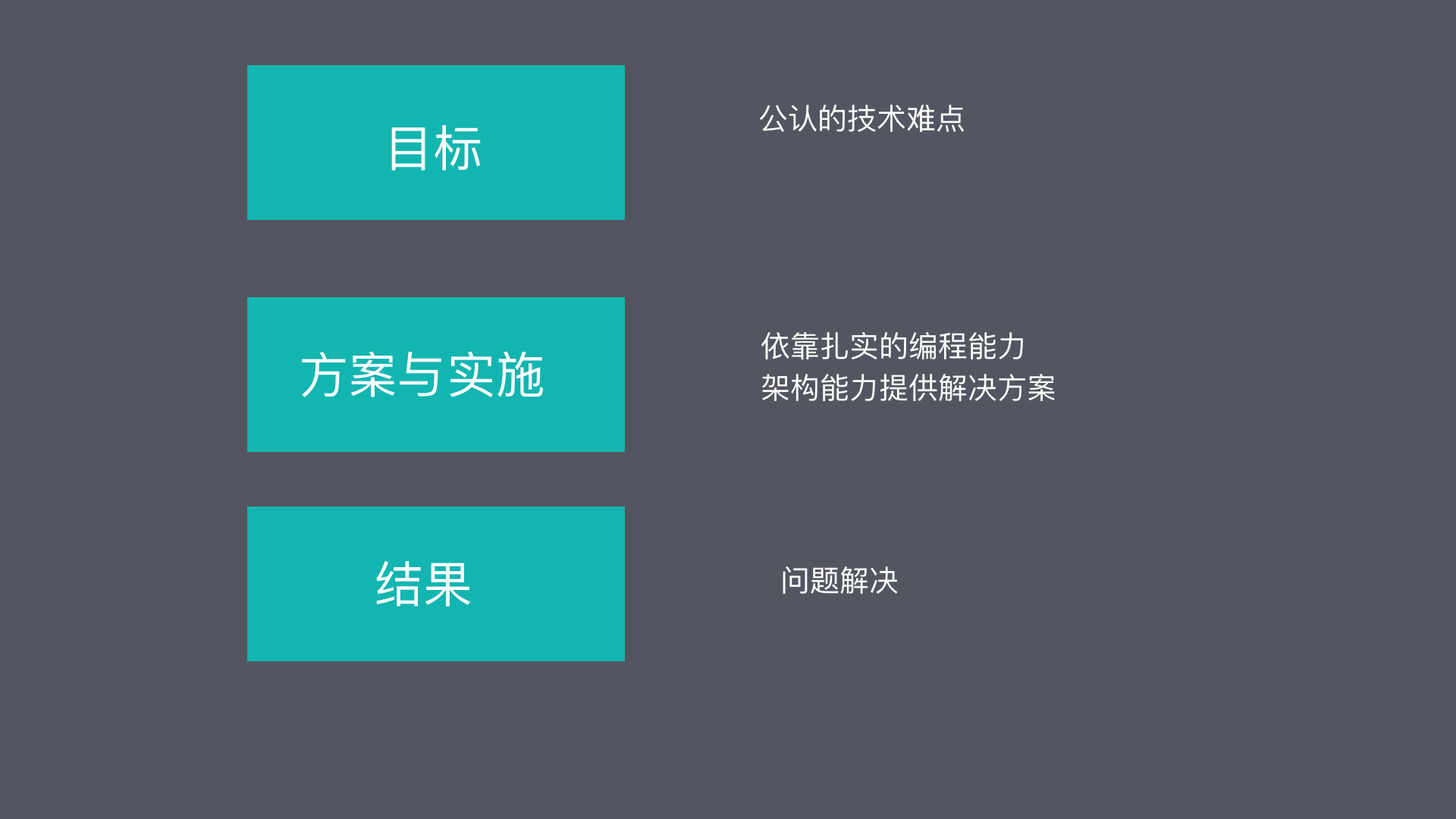
<style>
.page{position:relative;width:1456px;height:819px;background:#535660}
.page>*{position:absolute;margin:0}
.t1{font:29.6px "PingFangSC-Regular";color:#fefefe}
.t2{font:49.3px "PingFangSC-Regular";color:#fefefe}
.t3{font:29.6px/41.7px "PingFangSC-Regular";color:#fefefe}
</style>
<div class="page">
<p class="t1" style="left:759px;top:105px;width:205px;height:28px">公认的技术难点</p>
<p class="t2" style="left:391px;top:125px;width:90px;height:46px">目标</p>
<p class="t3" style="left:761px;top:332px;width:294px;height:69px">依靠扎实的编程能力<br>架构能力提供解决方案</p>
<p class="t2" style="left:302px;top:351px;width:242px;height:46px">方案与实施</p>
<p class="t2" style="left:376px;top:560px;width:95px;height:47px">结果</p>
<p class="t1" style="left:783px;top:566px;width:115px;height:28px">问题解决</p>
</div>
